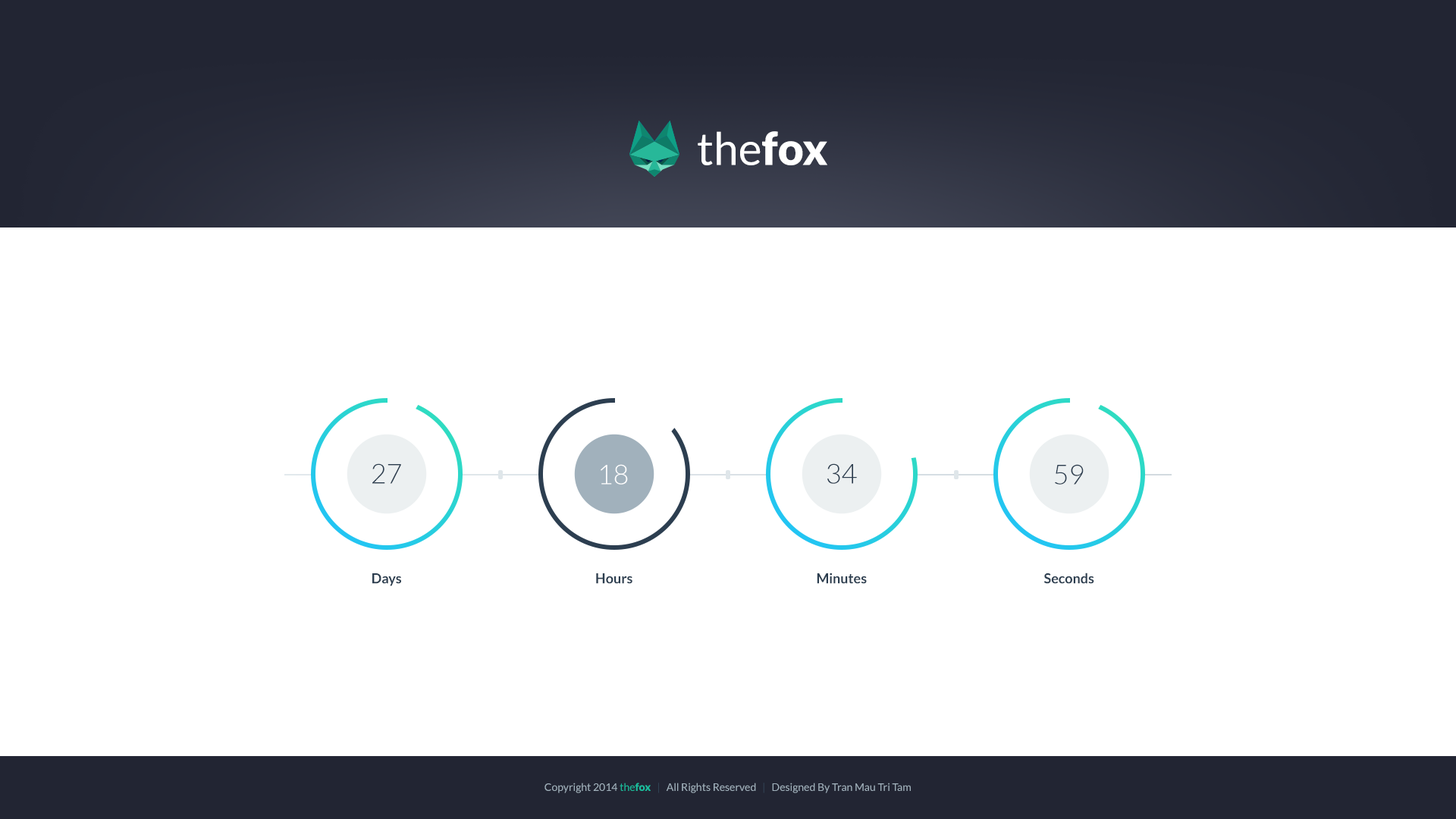
<style>
.page{position:relative;width:1456px;height:819px;background:#ffffff}
.page>*{position:absolute;margin:0}
.t1{font:44.9px "Lato-Regular";color:#ffffff}
.t2{font:44.9px "Lato-Black";color:#ffffff}
.t3{font:27.3px "Lato-Light";color:#2c3e50}
.t4{font:27.3px "Lato-Light";color:#ffffff}
.t5{font:13.6px "Lato-Bold";color:#2c3e50}
.t6{font:10.6px "Lato-Regular";color:#a1b1bc}
.t7{font:10.6px "Lato-Regular";color:#1abc9c}
.t8{font:10.6px "Lato-Black";color:#1abc9c}
.t9{font:10.6px "Lato-Regular";color:#304253}
</style>
<div class="page">
<p class="t1" style="left:698px;top:131px;width:129px;height:34px">the<span class="t2">fox</span></p>
<p class="t3" style="left:372px;top:463px;width:29px;height:21px">27</p>
<p class="t4" style="left:601px;top:464px;width:27px;height:21px">18</p>
<p class="t3" style="left:827px;top:463px;width:30px;height:21px">34</p>
<p class="t3" style="left:1055px;top:464px;width:29px;height:21px">59</p>
<p class="t5" style="left:372px;top:573px;width:29px;height:13px">Days</p>
<p class="t5" style="left:596px;top:573px;width:36px;height:11px">Hours</p>
<p class="t5" style="left:817px;top:573px;width:50px;height:11px">Minutes</p>
<p class="t5" style="left:1043px;top:573px;width:51px;height:11px">Seconds</p>
<p class="t6" style="left:544px;top:783px;width:367px;height:10px">Copyright 2014 <span class="t7">the</span><span class="t8">fox</span><span class="t9">   |   </span>All Rights Reserved<span class="t9">   |   </span>Designed By Tran Mau Tri Tam</p>
</div>
